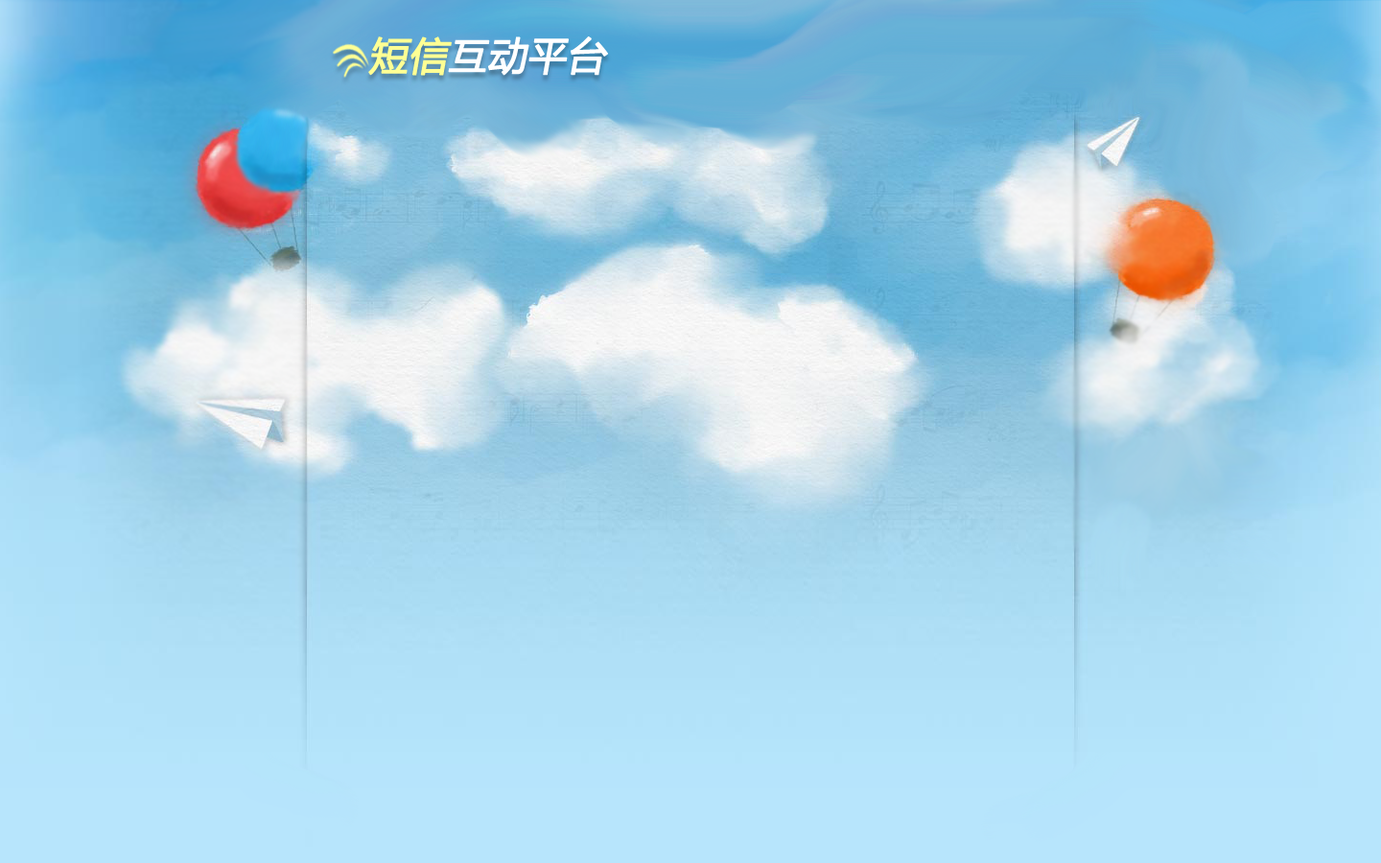
<style>
.page{position:relative;width:1381px;height:863px}
.page>*{position:absolute;margin:0}
.t1{font:38.4px "MicrosoftYaHei";color:#ffffff;font-weight:bold;font-style:italic}
.t2{font:38.4px "MicrosoftYaHei";color:#feff94;font-weight:bold;font-style:italic}
</style>
<div class="page">
<p class="t1" style="left:368px;top:36px;width:240px;height:40px"><span class="t2">短信</span>互动平台</p>
</div>
